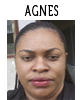
<style>
.page{position:relative;width:81px;height:100px;background:#ffffff}
.page>*{position:absolute;margin:0}
.t1{font:14.4px "Museo-300";letter-spacing:0.12em;color:#000000;scale:0.63 1}
</style>
<div class="page">
<p class="t1" style="left:24px;top:5px;width:35px;height:11px">AGNES</p>
</div>
